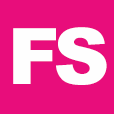
<style>
.page{position:relative;width:114px;height:114px;background:#e80d7b}
.page>*{position:absolute;margin:0}
.t1{font:78px "Arial-Black";letter-spacing:-0.08em;color:#fefefe}
</style>
<div class="page">
<p class="t1" style="left:13px;top:27px;width:94px;height:58px">FS</p>
</div>
